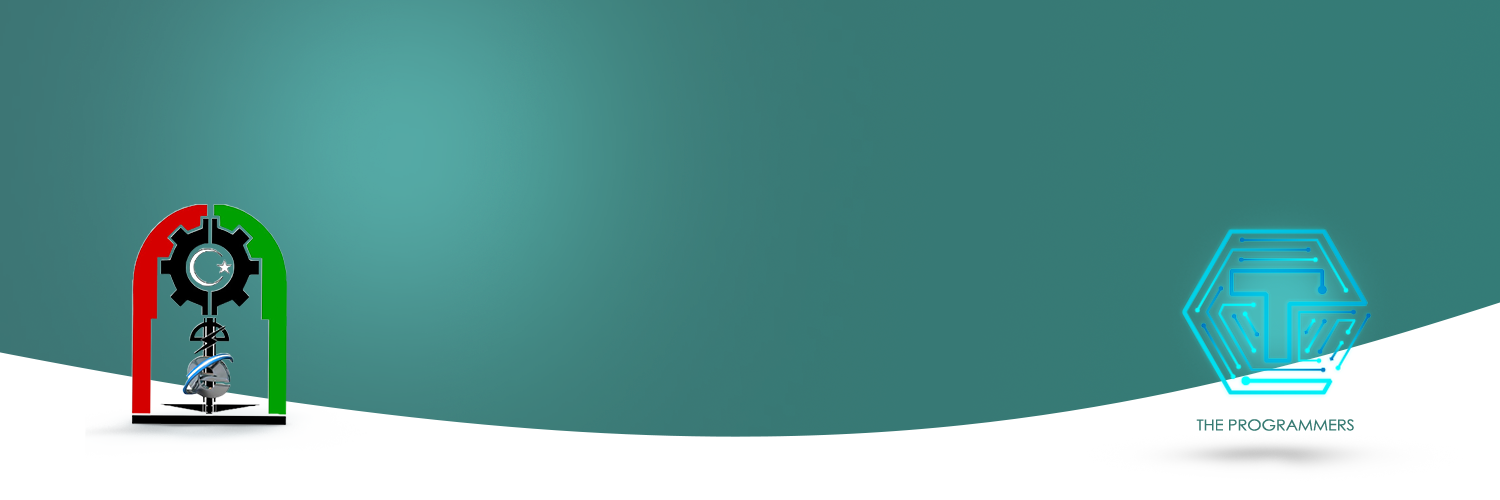
<style>
.page{position:relative;width:1500px;height:500px}
.page>*{position:absolute;margin:0}
.t1{font:15.1px "CenturyGothic";letter-spacing:-0.01em;color:#377b73;scale:1.1 1}
</style>
<div class="page">
<p class="t1" style="left:1196px;top:419px;width:158px;height:12px">THE PROGRAMMERS</p>
</div>
